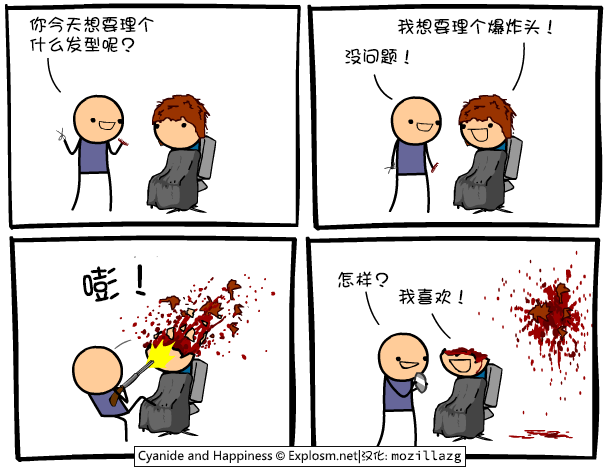
<style>
.page{position:relative;width:610px;height:470px;background:#ffffff}
.page>*{position:absolute;margin:0}
.t1{font:18px/20px "DFGirl";color:#000000}
.t2{font:18px "DFGirl";color:#000000}
.t3{font:40px "DFGirl";color:#000000}
</style>
<div class="page">
<p class="t1" style="left:29px;top:16px;width:125px;height:37px">你今天想要理个<br>什么发型呢？</p>
<p class="t2" style="left:397px;top:18px;width:155px;height:17px">我想要理个爆炸头！</p>
<p class="t2" style="left:345px;top:48px;width:64px;height:17px">没问题！</p>
<p class="t3" style="left:83px;top:264px;width:63px;height:38px;rotate:-7deg">嘭！</p>
<p class="t2" style="left:338px;top:271px;width:51px;height:17px">怎样？</p>
<p class="t2" style="left:398px;top:288px;width:65px;height:17px">我喜欢！</p>
</div>
